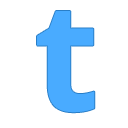
<style>
.page{position:relative;width:128px;height:128px;background:#ffffff}
.page>*{position:absolute;margin:0}
.t1{font:150px "OpenSans-Bold";color:#49abff}
</style>
<div class="page">
<p class="t1" style="left:37px;top:11px;width:58px;height:102px">t</p>
</div>
